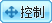
<style>
.page{position:relative;width:52px;height:23px}
.page>*{position:absolute;margin:0}
.t1{font:12px "SimSun";color:#222222}
</style>
<div class="page">
<p class="t1" style="left:21px;top:6px;width:23px;height:12px">控制</p>
</div>
